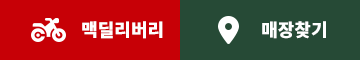
<style>
.page{position:relative;width:360px;height:60px;background:#264a36}
.page>*{position:absolute;margin:0}
.t1{font:18px "NotoSansKR-Black";color:#ffffff}
</style>
<div class="page">
<p class="t1" style="left:82px;top:21px;width:81px;height:18px">맥딜리버리</p>
<p class="t1" style="left:262px;top:21px;width:64px;height:18px">매장찾기</p>
</div>
